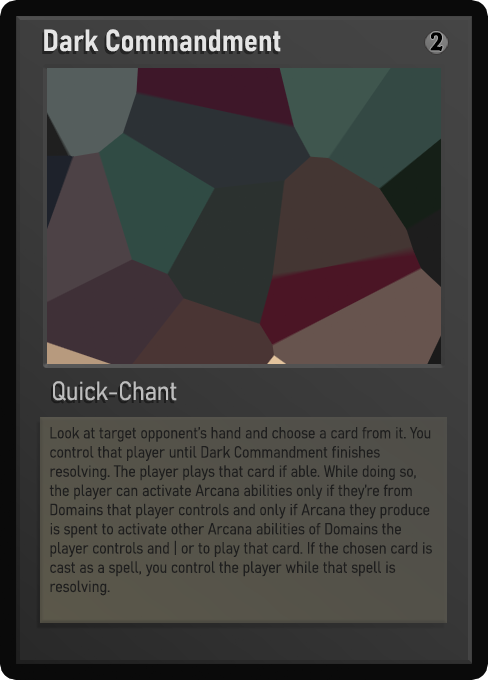
<style>
.page{position:relative;width:488px;height:680px}
.page>*{position:absolute;margin:0}
.t1{font:30px "Bahnschrift-SemiBoldSemiCondensed";color:#f2f2f2;font-weight:bold}
.t2{font:25px "WTRRoycroft";color:#000000;font-weight:bold;scale:1.09 1}
.t3{font:26px "Bahnschrift-LightSemiCondensed";color:#c8c8c8;font-weight:bold}
.t4{font:16px "Bahnschrift-LightSemiCondensed";color:#1e1e1e;font-weight:bold}
</style>
<div class="page">
<p class="t1" style="left:44px;top:29px;width:237px;height:23px;opacity:0.9">Dark Commandment</p>
<p class="t2" style="left:430px;top:32px;width:13px;height:19px">2</p>
<p class="t3" style="left:53px;top:381px;width:124px;height:20px;opacity:0.9">Quick-Chant</p>
<p class="t4" style="left:49px;top:427px;width:383px;height:169px">Look at target opponent’s hand and choose a card from it. You control that player until Dark Commandment finishes resolving. The player plays that card if able. While doing so, the player can activate Arcana abilities only if they’re from Domains that player controls and only if Arcana they produce is spent to activate other Arcana abilities of Domains the player controls and | or to play that card. If the chosen card is cast as a spell, you control the player while that spell is resolving.</p>
</div>
